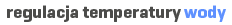
<style>
.page{position:relative;width:232px;height:25px;background:#ffffff}
.page>*{position:absolute;margin:0}
.t1{font:18px "Geogrotesque-Bold";color:#4c4c4a}
.t2{font:18px "Geogrotesque-Bold";color:#5f91ff}
</style>
<div class="page">
<p class="t1" style="left:7px;top:5px;width:219px;height:17px">regulacja temperatury <span class="t2">wody</span></p>
</div>
